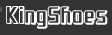
<style>
.page{position:relative;width:112px;height:35px;background:#333333}
.page>*{position:absolute;margin:0}
.t1{font:24px "SFElectrotomeShaded";color:#fefefe}
</style>
<div class="page">
<p class="t1" style="left:6px;top:6px;width:102px;height:23px">KingShoes</p>
</div>
